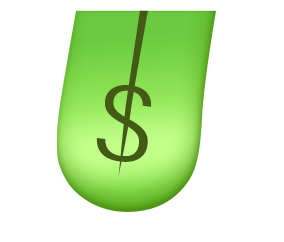
<style>
.page{position:relative;width:284px;height:242px;background:#ffffff}
.page>*{position:absolute;margin:0}
.t1{font:110px "AcuminConcept-CondensedLight";letter-spacing:0.025em;color:#435916;text-transform:uppercase;scale:1.3 1}
</style>
<div class="page">
<p class="t1" style="left:96px;top:85px;width:55px;height:77px;rotate:8deg">S</p>
</div>
